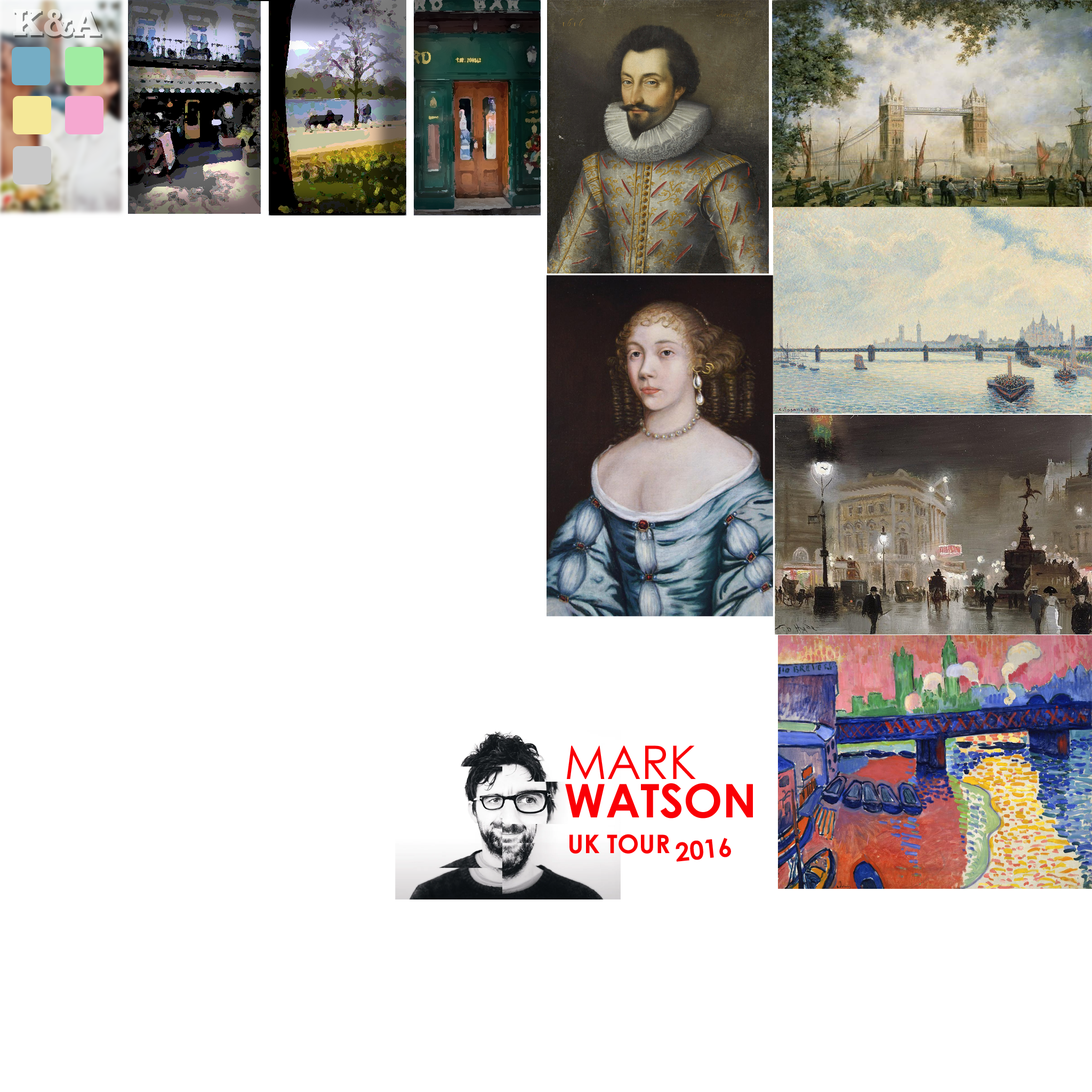
<style>
.page{position:relative;width:1092px;height:1092px;background:#ffffff}
.page>*{position:absolute;margin:0}
.t1{font:38.4px "BookmanOldStyle-Bold"}
.t2{font:46.4px/38.4px "CenturyGothic-Bold";color:#fa0006}
.t3{font:46.4px/38.4px "CenturyGothic";color:#fa0006}
.t4{font:25.6px "CenturyGothic-Bold";color:#fa0006}
</style>
<div class="page">
<p class="t1" style="left:13px;top:9px;width:88px;height:27px">K&amp;A</p>
<p class="t2" style="left:565px;top:745px;width:188px;height:73px"><span class="t3">MARK<br></span>WATSON</p>
<p class="t4" style="left:569px;top:834px;width:101px;height:20px">UK TOUR</p>
<p class="t4" style="left:676px;top:838px;width:55px;height:24px;rotate:-6deg">2016</p>
</div>
